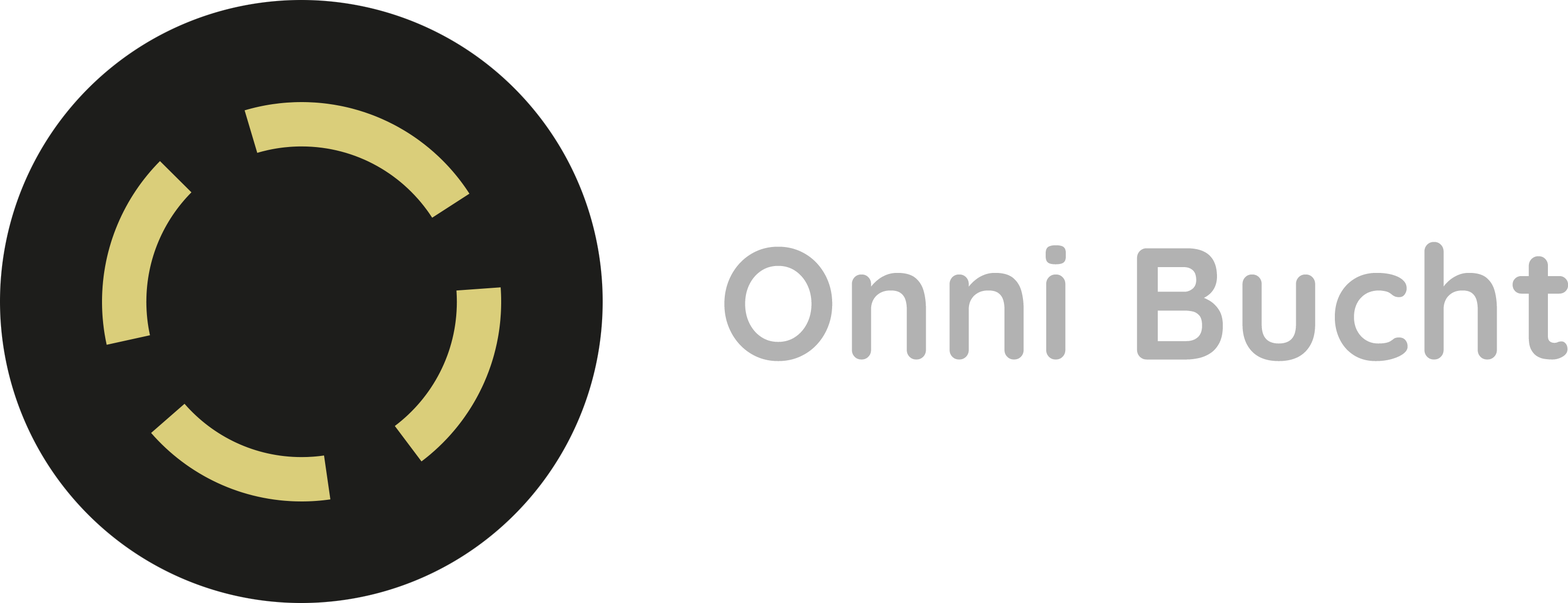
<style>
.page{position:relative;width:1568px;height:603px;background:#ffffff}
.page>*{position:absolute;margin:0}
.t1{font:158.6px "Quicksand-Bold";letter-spacing:0.02em;color:#b2b2b2;font-weight:bold}
</style>
<div class="page">
<p class="t1" style="left:724px;top:242px;width:845px;height:119px">Onni Bucht</p>
</div>
